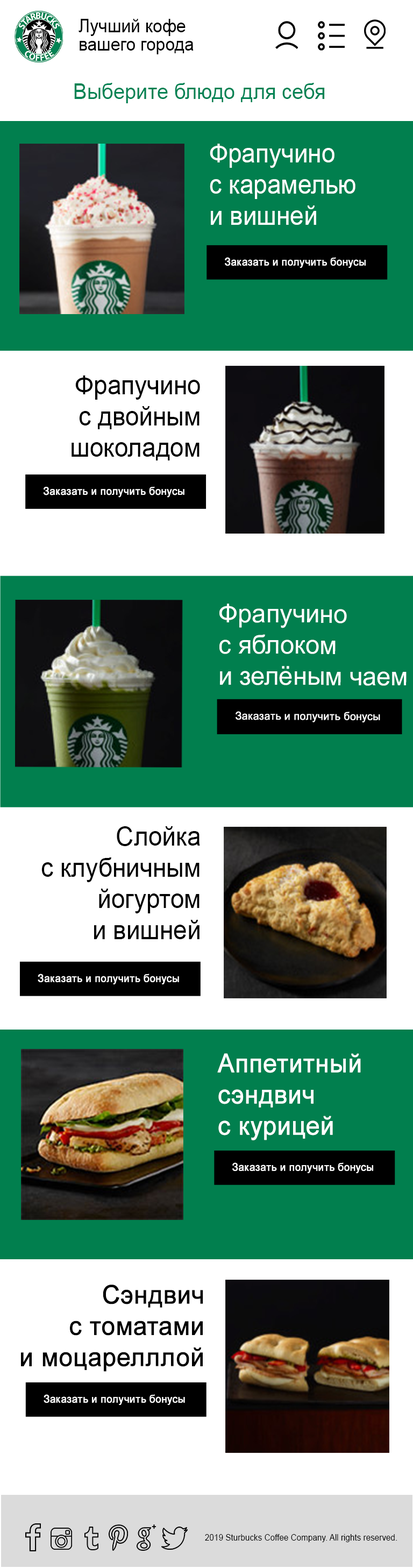
<style>
.page{position:relative;width:413px;height:1568px;background:#ffffff}
.page>*{position:absolute;margin:0}
.t1{font:18.1px/18.1px "ArialMT";color:#000000;scale:0.95 1}
.t2{font:21.7px "ArialMT";color:#028354;scale:0.95 1}
.t3{font:26px "ArialMT";color:#ffffff;scale:0.95 1}
.t4{font:26px/9.4px "ArialMT";color:#ffffff;scale:0.95 1}
.t5{font:10.8px "ArialMT";color:#ffffff;font-weight:bold;scale:0.95 1}
.t6{font:26px "ArialMT";color:#000000;scale:0.95 1}
.t7{font:26px "ArialMT";color:#ffffff}
.t8{font:10.8px "ArialMT";color:#ffffff;font-weight:bold}
.t9{font:26px "ArialMT";color:#ffffff;font-weight:bold;scale:0.95 1}
.t10{font:26px "ArialMT";color:#000000;font-weight:bold;scale:0.95 1}
.t11{font:26px/8.4px "ArialMT";color:#000000;font-weight:bold;scale:0.95 1}
.t12{font:8.7px "ArialMT";color:#000000;scale:0.95 1}
</style>
<div class="page">
<p class="t1" style="left:79px;top:19px;width:115px;height:35px">Лучший кофе<br>вашего города</p>
<p class="t2" style="left:74px;top:83px;width:251px;height:20px">Выберите блюдо для себя</p>
<p class="t3" style="left:210px;top:144px;width:146px;height:81px">Фрапучино <br>с карамелью <br>и <span class="t4">вишней</span></p>
<p class="t5" style="left:225px;top:257px;width:141px;height:11px">Заказать и получить бонусы</p>
<p class="t6" style="left:72px;top:375px;width:128px;height:85px;text-align:right">Фрапучино<br>с двойным<br>шоколадом</p>
<p class="t5" style="left:43px;top:487px;width:142px;height:11px">Заказать и получить бонусы</p>
<p class="t7" style="left:219px;top:604px;width:188px;height:82px">Фрапучино <br>с яблоком <br>и зелёным чаем</p>
<p class="t8" style="left:236px;top:711px;width:144px;height:11px">Заказать и получить бонусы</p>
<p class="t6" style="left:41px;top:826px;width:159px;height:113px;text-align:right">Слойка<br>с клубничным<br>йогуртом<br> и вишней</p>
<p class="t5" style="left:38px;top:974px;width:141px;height:10px">Заказать и получить бонусы</p>
<p class="t9" style="left:217px;top:1053px;width:144px;height:87px">Аппетитный<br>сэндвич <br>с курицей</p>
<p class="t5" style="left:232px;top:1162px;width:141px;height:11px">Заказать и получить бонусы</p>
<p class="t10" style="left:21px;top:1285px;width:182px;height:87px;text-align:right"><span class="t11">Сэндвич<br> с т</span>оматами<br> и моцарелллой</p>
<p class="t5" style="left:44px;top:1394px;width:141px;height:11px">Заказать и получить бонусы</p>
<p class="t12" style="left:205px;top:1534px;width:192px;height:8px">2019 Sturbucks Coffee Company. All rights reserved.</p>
</div>
